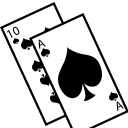
<style>
.page{position:relative;width:128px;height:128px;background:#ffffff}
.page>*{position:absolute;margin:0}
.t1{font:12.5px "MyriadPro-Regular";color:#000000}
</style>
<div class="page">
<p class="t1" style="left:7px;top:26px;width:13px;height:12px;rotate:-26deg">10</p>
<p class="t1" style="left:38px;top:39px;width:8px;height:10px;rotate:-23deg">A</p>
<p class="t1" style="left:116px;top:101px;width:8px;height:10px;rotate:-23deg">A</p>
</div>
